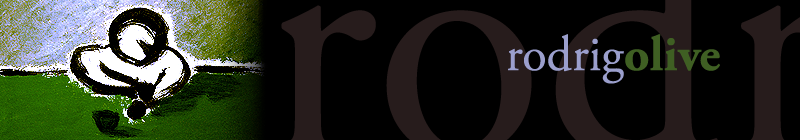
<style>
.page{position:relative;width:800px;height:140px;background:#000000}
.page>*{position:absolute;margin:0}
.t1{font:50px "AGaramondPro-Regular";color:#9b9fcd}
.t2{font:50px "AGaramondPro-Bold";color:#3f5f23}
</style>
<div class="page">
<p class="t1" style="left:508px;top:34px;width:212px;height:50px">rodrig<span class="t2">olive</span></p>
</div>
